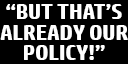
<style>
.page{position:relative;width:128px;height:64px;background:#000000}
.page>*{position:absolute;margin:0}
.t1{font:22.2px/20.8px "HPSimplified-Bold";letter-spacing:-0.01em;color:#ffffff}
</style>
<div class="page">
<p class="t1" style="left:0px;top:4px;width:128px;height:56px;text-align:center">“BUT THAT’S<br>ALREADY OUR<br>POLICY!”</p>
</div>
